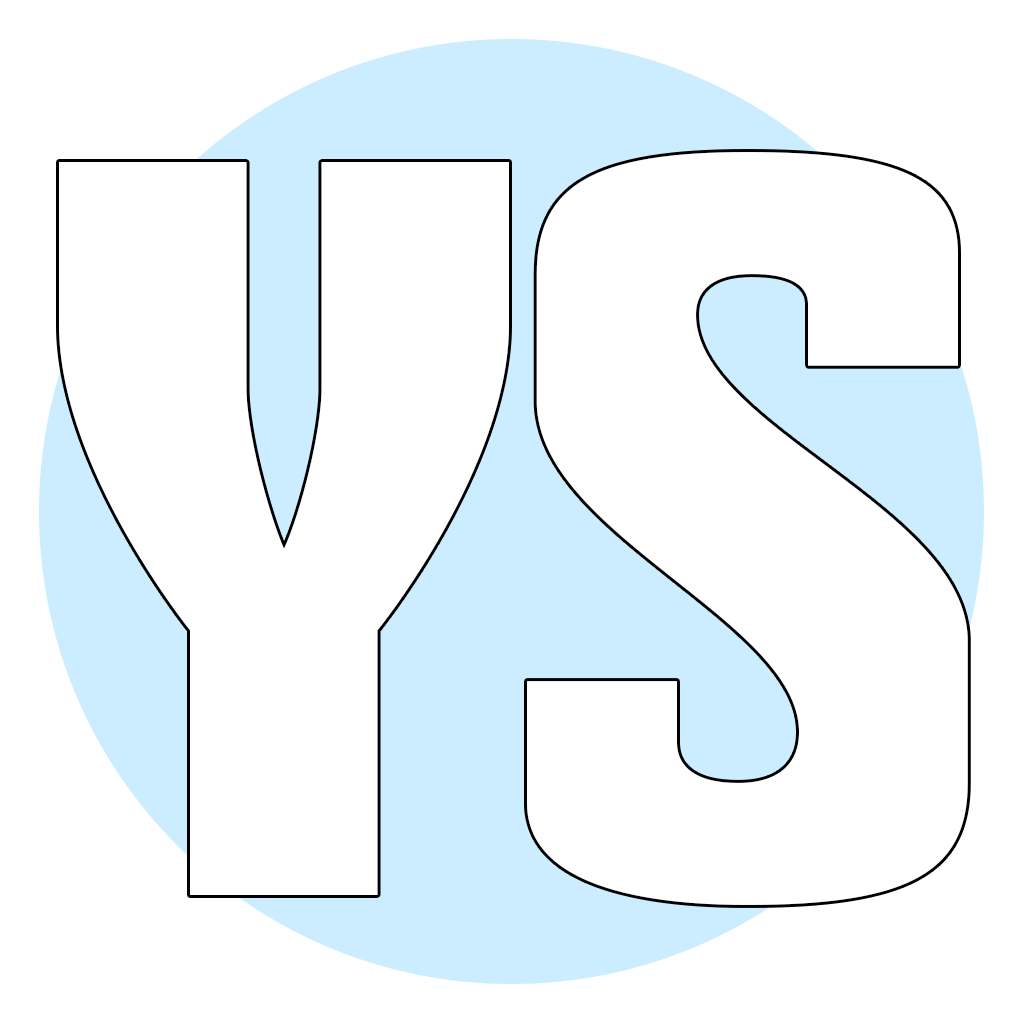
<style>
.page{position:relative;width:1024px;height:1024px;background:#ffffff}
.page>*{position:absolute;margin:0}
.t1{font:1017.5px "Mikodacs";color:#ffffff;scale:0.92 1}
</style>
<div class="page">
<p class="t1" style="left:59px;top:152px;width:909px;height:753px">YS</p>
</div>
